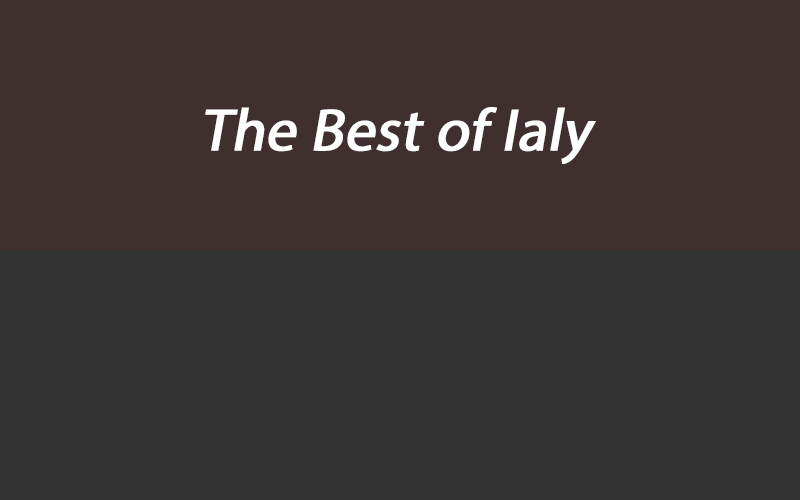
<style>
.page{position:relative;width:800px;height:500px;background:#333333}
.page>*{position:absolute;margin:0}
.t1{font:60px "MyriadPro-Regular";letter-spacing:-0.01em;color:#ffffff;font-weight:bold;font-style:italic}
</style>
<div class="page">
<p class="t1" style="left:205px;top:107px;width:391px;height:57px">The Best of Ialy</p>
</div>
